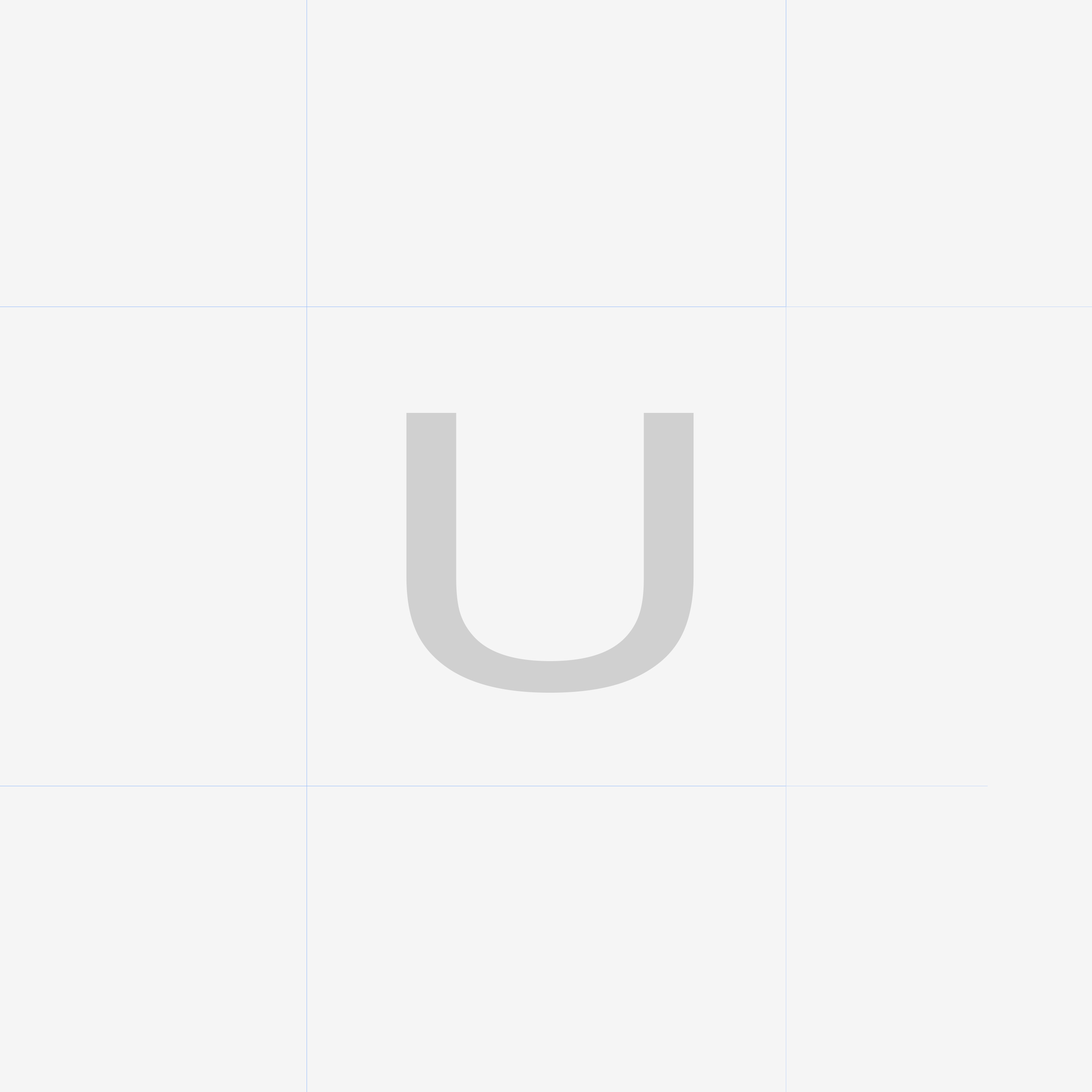
<style>
.page{position:relative;width:1092px;height:1092px;background:#f5f5f5}
.page>*{position:absolute;margin:0}
.t1{font:377.3px "Verdana";letter-spacing:-0.016em;color:#d0d0d0;scale:1.36 1}
</style>
<div class="page">
<p class="t1" style="left:406px;top:413px;width:288px;height:280px">U</p>
</div>
